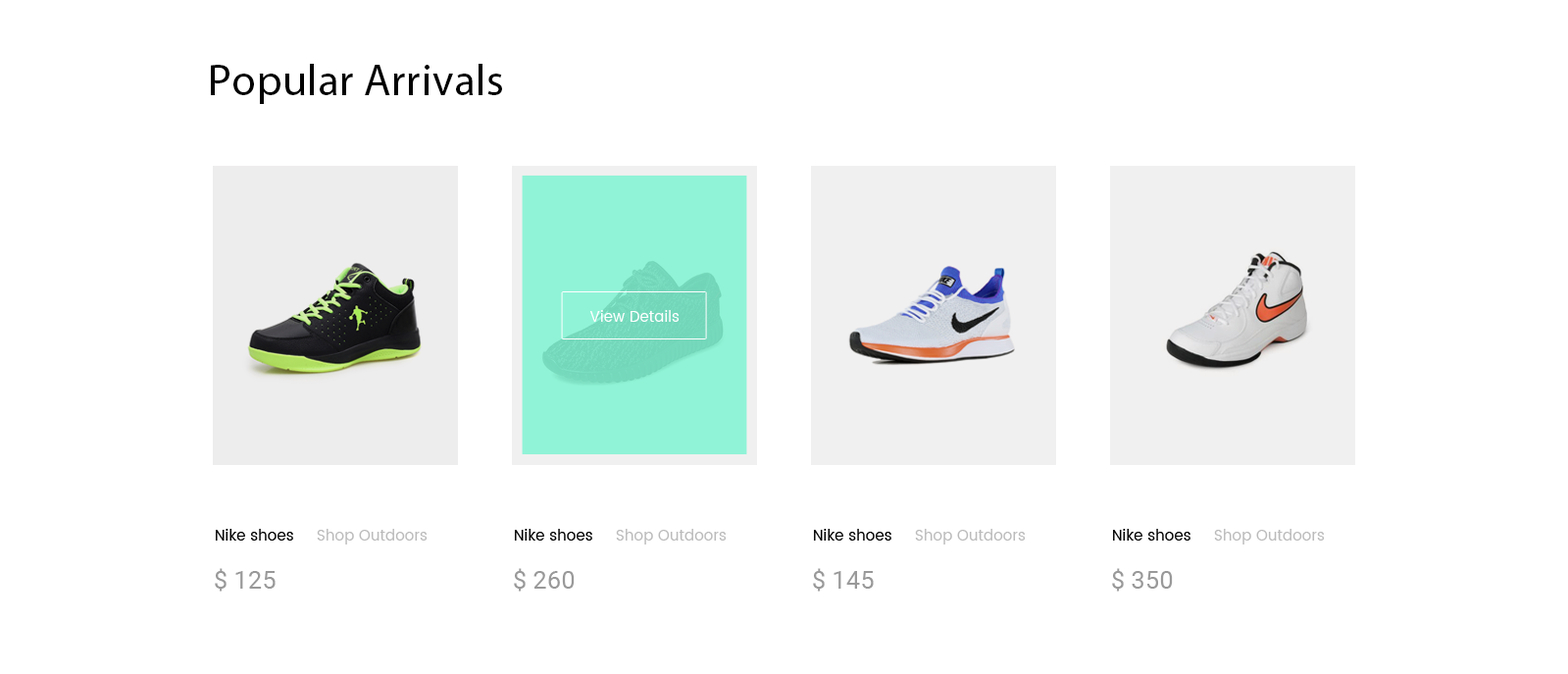
<style>
.page{position:relative;width:1568px;height:674px;background:#ffffff}
.page>*{position:absolute;margin:0}
.t1{font:44.1px "MyriadPro-Regular";letter-spacing:0.01em;color:#000000}
.t2{font:14.7px "Poppins-Regular";letter-spacing:0.01em;color:#ffffff}
.t3{font:14.7px "Poppins-Regular";letter-spacing:0.01em;color:#bbbbbb}
.t4{font:14.7px "Poppins-Regular";letter-spacing:0.01em;color:#000000}
.t5{font:24.5px "Roboto-Regular";letter-spacing:0.01em;color:#999999}
</style>
<div class="page">
<p class="t1" style="left:211px;top:64px;width:291px;height:40px">Popular Arrivals</p>
<p class="t2" style="left:589px;top:310px;width:91px;height:12px">View Details</p>
<p class="t3" style="left:216px;top:529px;width:212px;height:15px"><span class="t4">Nike shoes     </span>Shop Outdoors</p>
<p class="t3" style="left:515px;top:529px;width:212px;height:15px"><span class="t4">Nike shoes     </span>Shop Outdoors</p>
<p class="t3" style="left:814px;top:529px;width:212px;height:15px"><span class="t4">Nike shoes     </span>Shop Outdoors</p>
<p class="t3" style="left:1113px;top:529px;width:212px;height:15px"><span class="t4">Nike shoes     </span>Shop Outdoors</p>
<p class="t5" style="left:215px;top:568px;width:61px;height:23px">$ 125</p>
<p class="t5" style="left:514px;top:568px;width:61px;height:23px">$ 260</p>
<p class="t5" style="left:813px;top:568px;width:61px;height:23px">$ 145</p>
<p class="t5" style="left:1112px;top:568px;width:61px;height:23px">$ 350</p>
</div>
